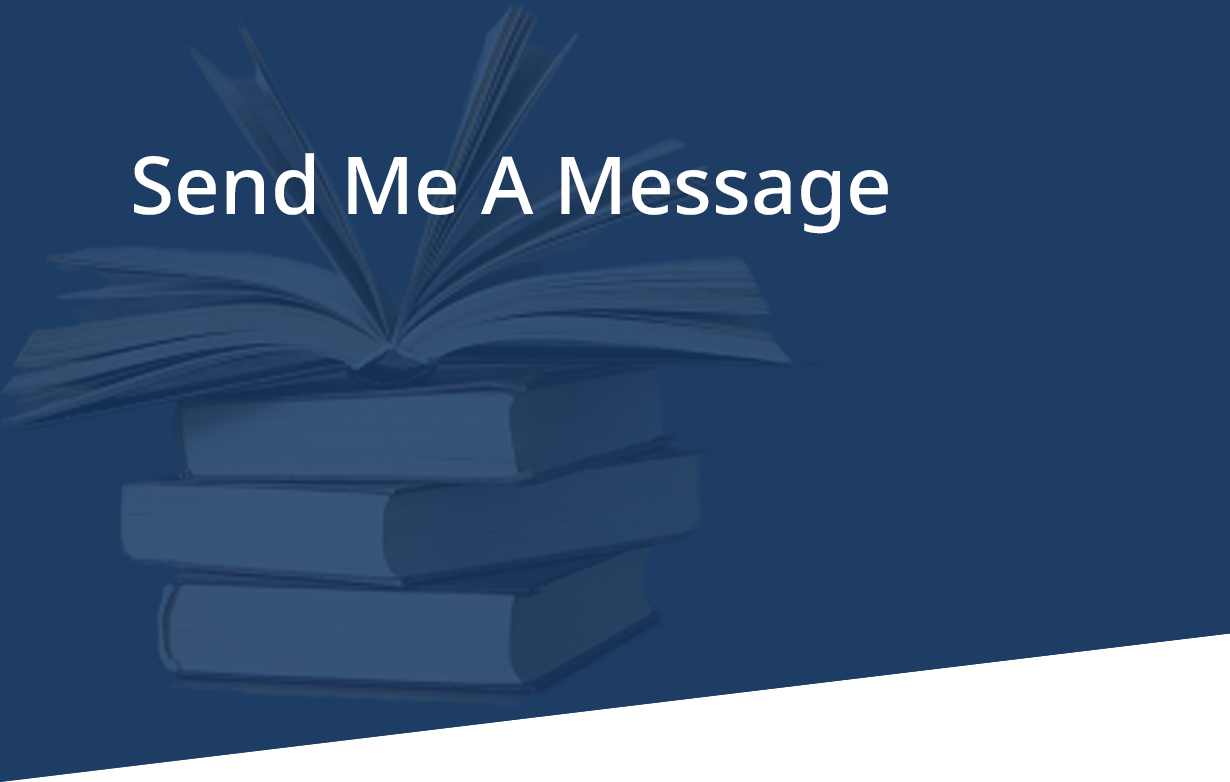
<style>
.page{position:relative;width:1230px;height:782px;background:#1d3d65}
.page>*{position:absolute;margin:0}
.t1{font:80px "NotoSans-Medium";color:#ffffff}
</style>
<div class="page">
<p class="t1" style="left:134px;top:153px;width:754px;height:81px">Send Me A Message</p>
</div>
